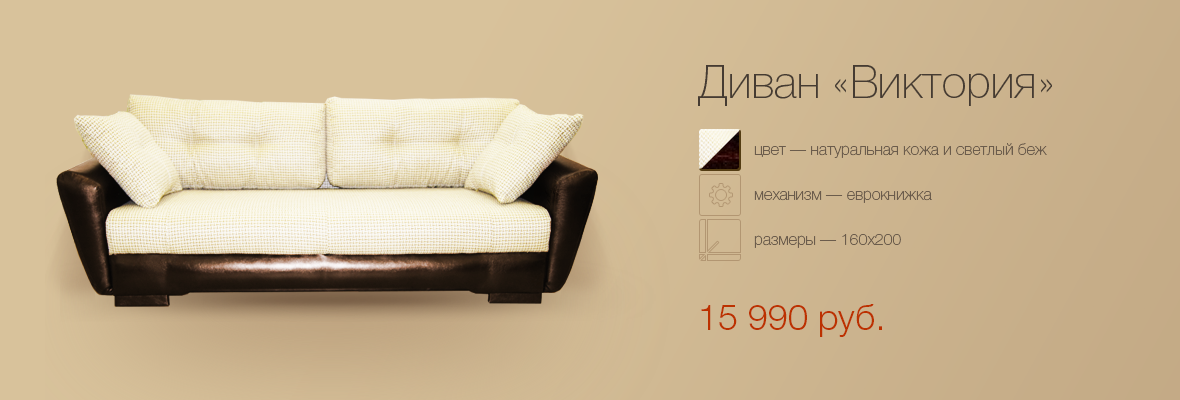
<style>
.page{position:relative;width:1180px;height:400px}
.page>*{position:absolute;margin:0}
.t1{font:45px "Helvetica-3-Thin";color:#453b32}
.t2{font:16px "Helvetica-3-Thin";color:#6b5c4c}
.t3{font:36px "Helvetica-4-Light";color:#bc3100}
</style>
<div class="page">
<p class="t1" style="left:698px;top:65px;width:354px;height:41px">Диван «Виктория»</p>
<p class="t2" style="left:754px;top:143px;width:293px;height:15px">цвет — натуральная кожа и светлый беж</p>
<p class="t2" style="left:754px;top:190px;width:178px;height:13px">механизм — еврокнижка</p>
<p class="t2" style="left:754px;top:234px;width:147px;height:14px">размеры — 160х200</p>
<p class="t3" style="left:701px;top:304px;width:181px;height:33px">15 990 руб.</p>
</div>
